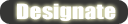
<style>
.page{position:relative;width:128px;height:24px;background:#ffffff}
.page>*{position:absolute;margin:0}
.t1{font:19.2px "Impact";color:#ffffff;scale:1.25 1}
</style>
<div class="page">
<p class="t1" style="left:17px;top:3px;width:99px;height:18px">Designate</p>
</div>
